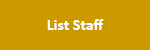
<style>
.page{position:relative;width:150px;height:50px;background:#cc9900}
.page>*{position:absolute;margin:0}
.t1{font:16px "Calibri-Bold";color:#ffffff}
</style>
<div class="page">
<p class="t1" style="left:47px;top:19px;width:57px;height:11px">List Staff</p>
</div>
